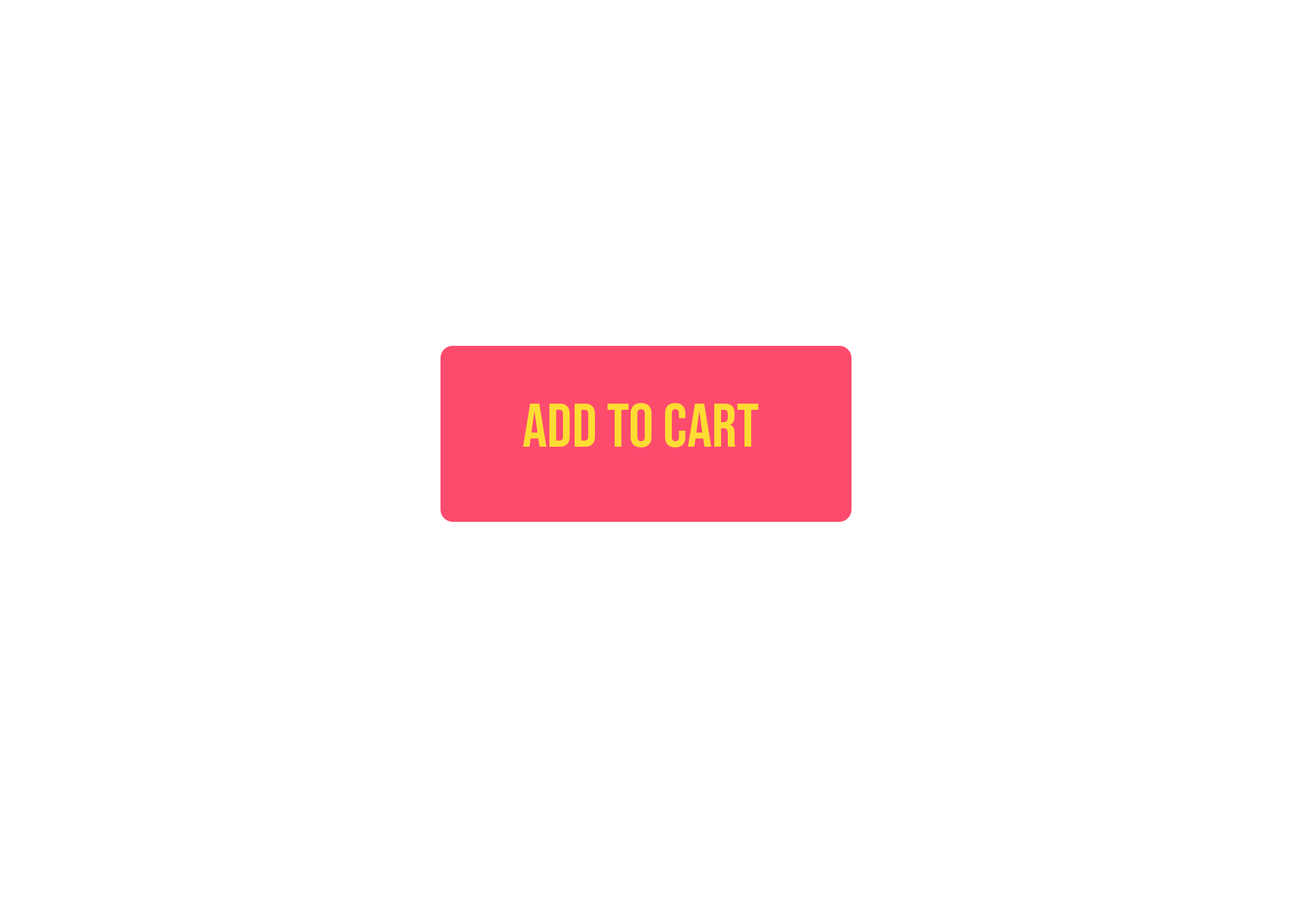
<style>
.page{position:relative;width:1292px;height:923px;background:#ffffff}
.page>*{position:absolute;margin:0}
.t1{font:61.5px "BebasNeue-Regular";color:#fedc32}
</style>
<div class="page">
<p class="t1" style="left:523px;top:403px;width:236px;height:44px">Add To Cart</p>
</div>
